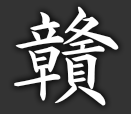
<style>
.page{position:relative;width:131px;height:114px;background:#333333}
.page>*{position:absolute;margin:0}
.t1{font:105.8px "ZKTKUANGSKSJF--GBK1-0";color:#ffffff}
</style>
<div class="page">
<p class="t1" style="left:14px;top:6px;width:105px;height:100px">贛</p>
</div>
